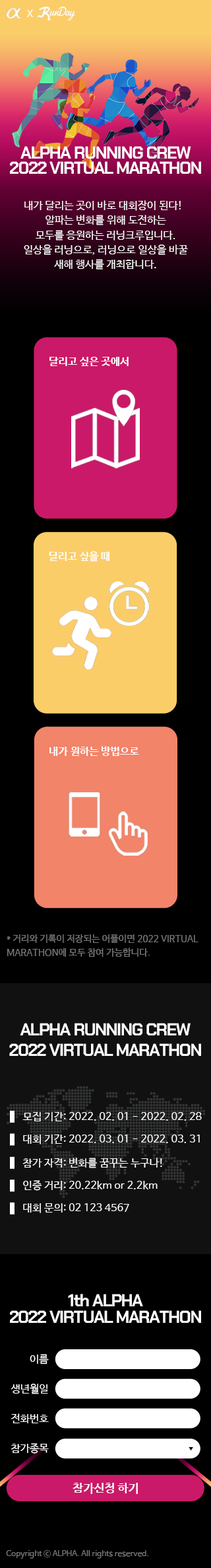
<style>
.page{position:relative;width:211px;height:1568px;background:#000000}
.page>*{position:absolute;margin:0}
.t1{font:10.7px "ChakraPetch-Regular";letter-spacing:-0.06em;color:#ffffff}
.t2{font:17.2px/6.6px "ChakraPetch-Bold";letter-spacing:-0.06em;color:#ffffff}
.t3{font:10.6px/6.6px "NanumBarunGothic";letter-spacing:0.005em;color:#ffffff}
.t4{font:10.6px "NanumBarunGothicBold";letter-spacing:0.005em;color:#ffffff}
.t5{font:9.3px "NanumBarunGothic";letter-spacing:0.005em;color:#777777}
.t6{font:17.2px/10.6px "ChakraPetch-Bold";letter-spacing:-0.06em;color:#ffffff}
.t7{font:10.6px "NanumBarunGothic";letter-spacing:0.005em;color:#ffffff}
.t8{font:17.2px/8.8px "ChakraPetch-Bold";letter-spacing:-0.06em;color:#ffffff}
.t9{font:10.6px "NanumBarunGothic";color:#ffffff}
.t10{font:11.9px "NanumBarunGothicBold";color:#ffffff}
.t11{font:7.9px "NanumBarunGothic";color:#777777}
</style>
<div class="page">
<p class="t1" style="left:26px;top:9px;width:7px;height:9px">X</p>
<p class="t2" style="left:10px;top:146px;width:192px;height:28px;text-align:center">ALPHA RUNNING CREW<br>2022 VIRTUAL MARATHON</p>
<p class="t3" style="left:24px;top:200px;width:164px;height:70px;text-align:center">내가 달리는 곳이 바로 대회장이 된다!  <br>알파는 변화를 위해 도전하는<br>모두를 응원하는 러닝크루입니다.<br>일상을 러닝으로, 러닝으로 일상을 바꿀<br>새해 행사를 개최합니다.</p>
<p class="t4" style="left:50px;top:357px;width:79px;height:9px">달리고 싶은 곳에서</p>
<p class="t4" style="left:49px;top:551px;width:61px;height:11px">달리고 싶을 때</p>
<p class="t4" style="left:50px;top:746px;width:89px;height:10px">내가 원하는 방법으로</p>
<p class="t5" style="left:7px;top:934px;width:192px;height:23px">* 거리와 기록이 저장되는 어플이면 2022 VIRTUAL MARATHON에 모두 참여 가능합니다.</p>
<p class="t6" style="left:9px;top:1023px;width:193px;height:33px;text-align:center">ALPHA RUNNING CREW<br>2022 VIRTUAL MARATHON</p>
<p class="t7" style="left:22px;top:1112px;width:180px;height:9px">모집 기간: 2022. 02. 01 - 2022. 02. 28</p>
<p class="t7" style="left:23px;top:1135px;width:177px;height:9px">대회 기간: 2022. 03. 01 - 2022. 03. 31</p>
<p class="t7" style="left:22px;top:1158px;width:141px;height:10px">참가 자격: 변화를 꿈꾸는 누구나!</p>
<p class="t7" style="left:23px;top:1180px;width:135px;height:11px">인증 거리: 20.22km or 2.2km</p>
<p class="t7" style="left:23px;top:1203px;width:107px;height:10px">대회 문의: 02 123 4567</p>
<p class="t8" style="left:10px;top:1294px;width:192px;height:29px;text-align:center">1th ALPHA<br>2022 VIRTUAL MARATHON</p>
<p class="t9" style="left:30px;top:1354px;width:19px;height:10px">이름</p>
<p class="t9" style="left:11px;top:1384px;width:37px;height:10px">생년월일</p>
<p class="t9" style="left:11px;top:1413px;width:38px;height:10px">전화번호</p>
<p class="t9" style="left:11px;top:1443px;width:38px;height:11px">참가종목</p>
<p class="t10" style="left:73px;top:1483px;width:65px;height:11px">참가신청 하기</p>
<p class="t11" style="left:6px;top:1549px;width:143px;height:10px">Copyright ⓒ ALPHA. All rights reserved.</p>
</div>
